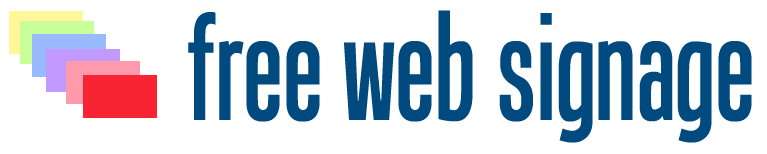
<style>
.page{position:relative;width:767px;height:154px;background:#ffffff}
.page>*{position:absolute;margin:0}
.t1{font:149.4px "Tandelle";color:#004a80}
</style>
<div class="page">
<p class="t1" style="left:188px;top:10px;width:564px;height:133px">free web signage</p>
</div>
